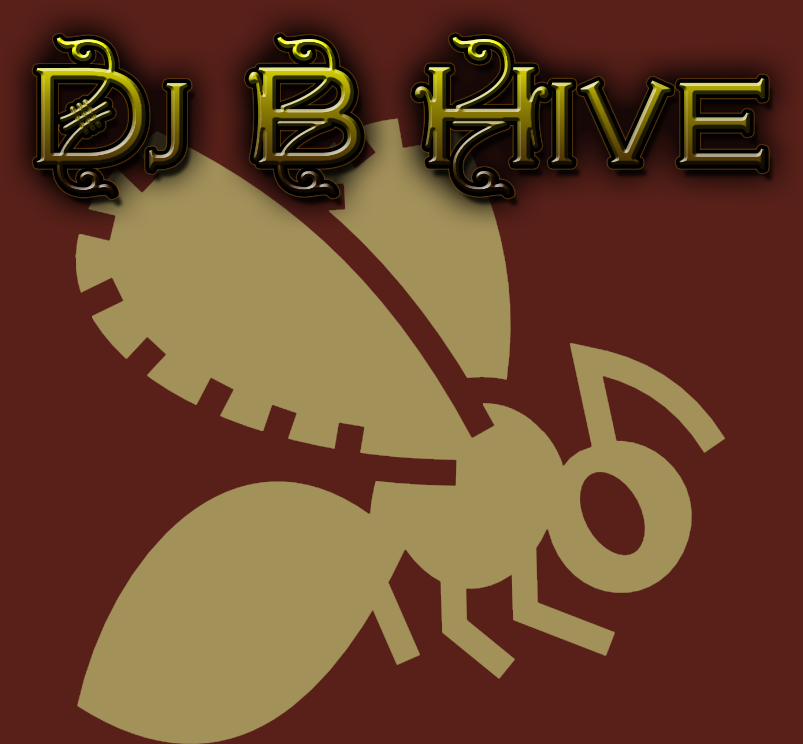
<style>
.page{position:relative;width:803px;height:744px;background:#582019}
.page>*{position:absolute;margin:0}
.t1{font:130px "CopperplateDecoLight";font-weight:bold}
</style>
<div class="page">
<p class="t1" style="left:36px;top:37px;width:729px;height:159px">Dj B Hive</p>
<p class="t1" style="left:36px;top:37px;width:729px;height:159px">Dj B Hive</p>
</div>
